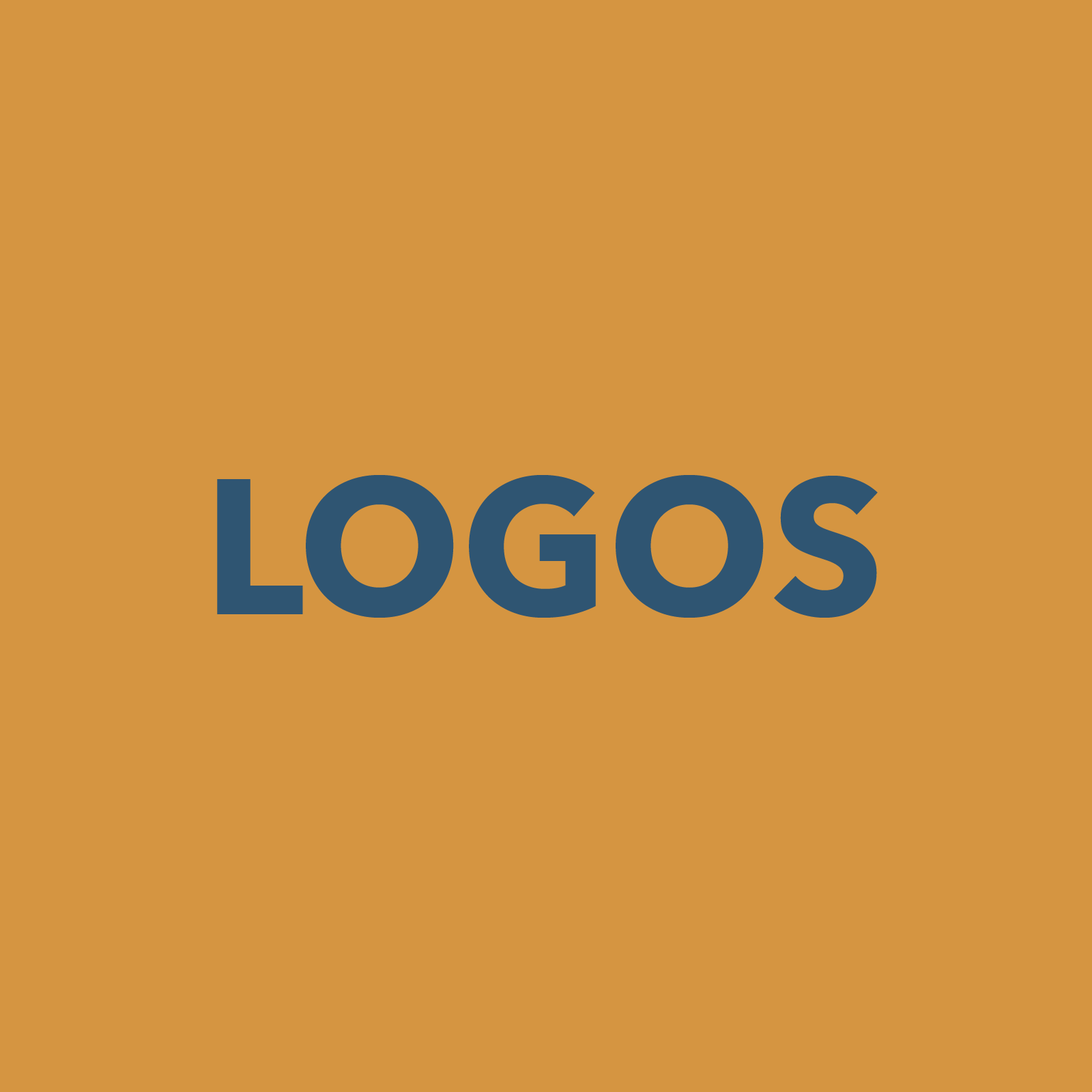
<style>
.page{position:relative;width:1092px;height:1092px;background:#d59541}
.page>*{position:absolute;margin:0}
.t1{font:191.3px "AvenirNext-Bold";color:#2f5572}
</style>
<div class="page">
<p class="t1" style="left:217px;top:475px;width:661px;height:143px">LOGOS</p>
</div>
